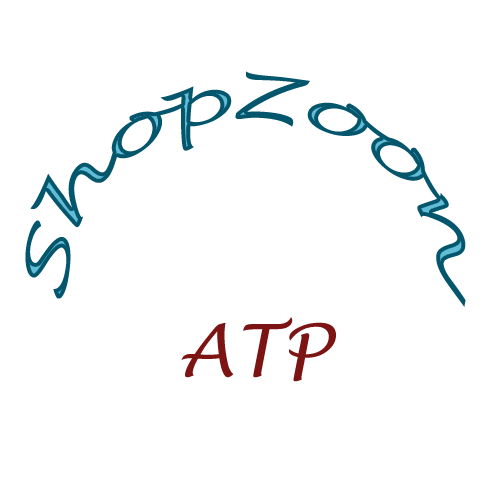
<style>
.page{position:relative;width:500px;height:500px;background:#ffffff}
.page>*{position:absolute;margin:0}
.t1{font:60px "LucidaHandwriting-Italic";color:#04566d}
.t2{font:72px "LucidaHandwriting-Italic";color:#7d1414}
</style>
<div class="page">
<p class="t1" style="left:25px;top:71px;width:441px;height:236px">ShopZoon</p>
<p class="t2" style="left:181px;top:317px;width:155px;height:65px">ATP</p>
</div>
